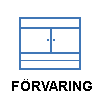
<style>
.page{position:relative;width:100px;height:100px;background:#ffffff}
.page>*{position:absolute;margin:0}
.t1{font:14px "Arial-BoldMT";color:#000000}
</style>
<div class="page">
<p class="t1" style="left:12px;top:79px;width:80px;height:12px">FÖRVARING</p>
</div>
